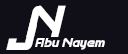
<style>
.page{position:relative;width:128px;height:54px;background:#100e17}
.page>*{position:absolute;margin:0}
.t1{font:47.2px "Spantaran";color:#ffffff}
.t2{font:13.5px "Spantaran";color:#ffffff}
</style>
<div class="page">
<p class="t1" style="left:26px;top:5px;width:40px;height:32px">N</p>
<p class="t1" style="left:6px;top:18px;width:31px;height:32px">J</p>
<p class="t2" style="left:35px;top:38px;width:70px;height:12px">Abu Nayem</p>
</div>
